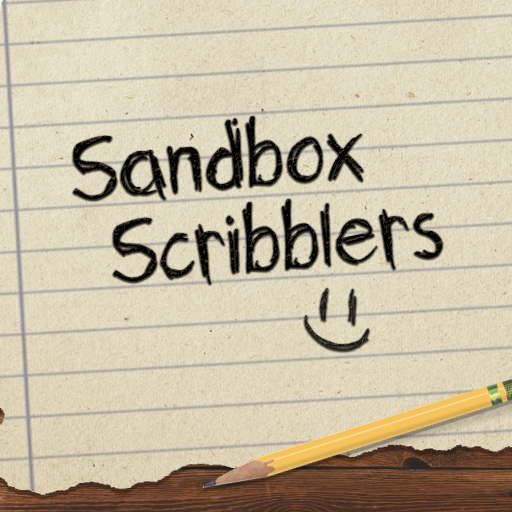
<style>
.page{position:relative;width:512px;height:512px}
.page>*{position:absolute;margin:0}
.t1{font:89.3px "SketchitMeansSketchit";color:#000000}
</style>
<div class="page">
<p class="t1" style="left:73px;top:115px;width:290px;height:85px;rotate:-5deg">Sandbox</p>
<p class="t1" style="left:113px;top:198px;width:329px;height:86px;rotate:-5deg">Scribblers</p>
</div>
